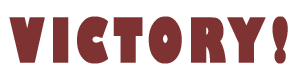
<style>
.page{position:relative;width:304px;height:72px;background:#ffffff}
.page>*{position:absolute;margin:0}
.t1{font:60px "GillSans-UltraBoldCondensed";letter-spacing:0.075em;color:#7f3232;font-weight:bold}
</style>
<div class="page">
<p class="t1" style="left:9px;top:16px;width:279px;height:48px">VICTORY!</p>
</div>
